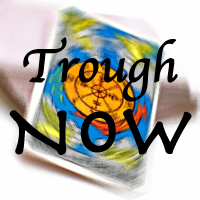
<style>
.page{position:relative;width:200px;height:200px;background:#fefefe}
.page>*{position:absolute;margin:0}
.t1{font:48px "Apple-Chancery";color:#000000;font-weight:bold}
.t2{font:72px "Herculanum";color:#000000;font-weight:bold}
</style>
<div class="page">
<p class="t1" style="left:23px;top:37px;width:155px;height:65px">Trough</p>
<p class="t2" style="left:9px;top:108px;width:183px;height:47px">NOW</p>
</div>
